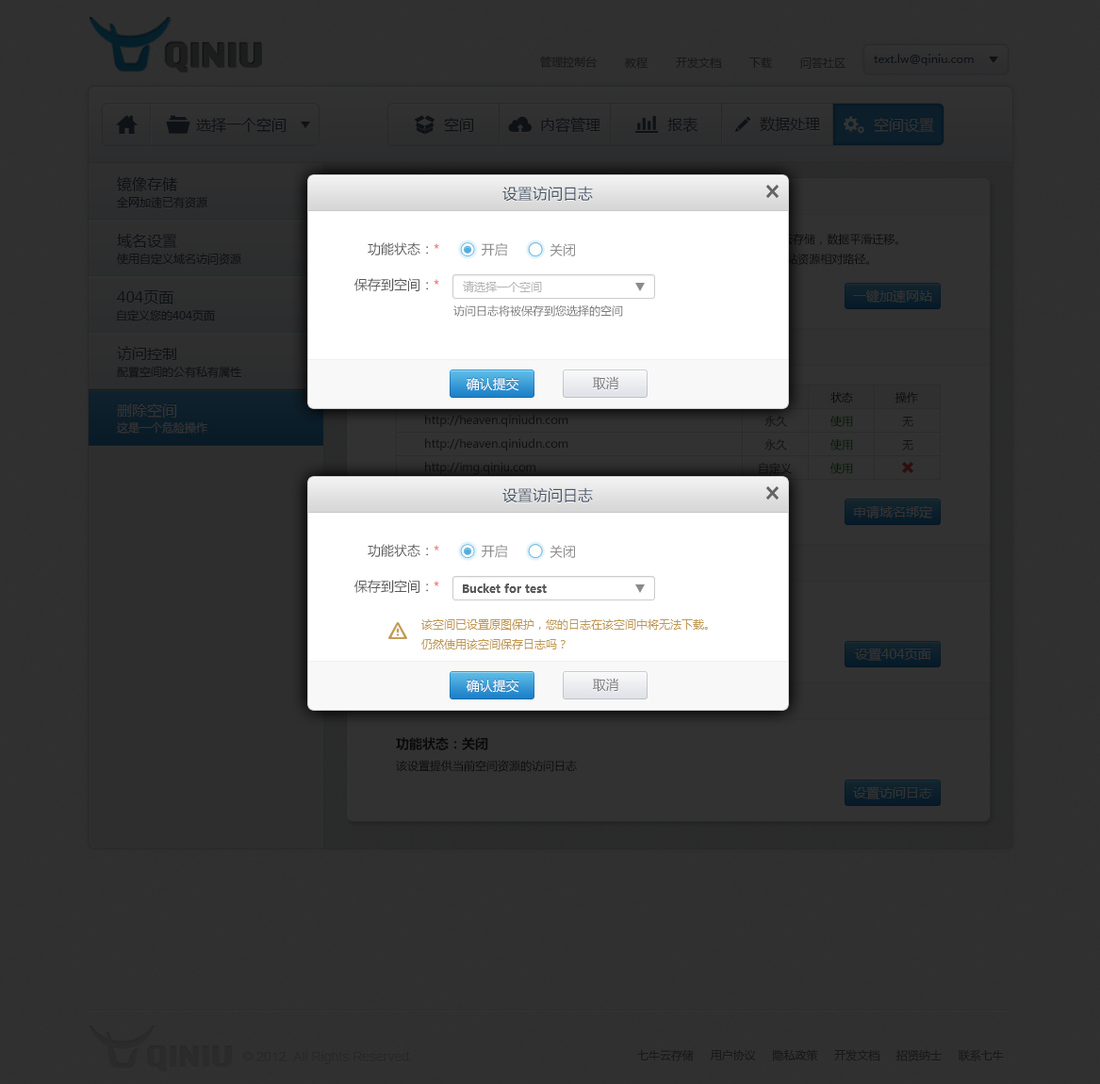
<style>
.page{position:relative;width:1100px;height:1084px;background:#303030}
.page>*{position:absolute;margin:0}
.t1{font:11.3px "MicrosoftYaHei";color:#0e1115}
.t2{font:11.3px "MicrosoftYaHei";color:#181818}
.t3{font:15.1px "MicrosoftYaHei";color:#0e1115}
.t4{font:15.1px "MicrosoftYaHei";color:#333333}
.t5{font:15.1px "MicrosoftYaHei";color:#465567}
.t6{font:13.2px "MicrosoftYaHei";color:#585858}
.t7{font:13.2px "MicrosoftYaHei";color:#e35959}
.t8{font:13.2px "MicrosoftYaHei";color:#8b8b8b}
.t9{font:13.2px "MicrosoftYaHei";color:#e65050}
.t10{font:11.3px "MicrosoftYaHei";color:#b4b4b4}
.t11{font:13.2px "MicrosoftYaHei";color:#333333}
.t12{font:11.3px "MicrosoftYaHei";color:#787878}
.t13{font:13.2px "MicrosoftYaHei";color:#ffffff}
.t14{font:13.2px "MicrosoftYaHei";color:#787878}
.t15{font:11.3px "MicrosoftYaHei";color:#0a0a0a}
.t16{font:11.3px "MicrosoftYaHei";color:#333333}
.t17{font:11.3px "MicrosoftYaHei";color:#111111}
.t18{font:11.3px "MicrosoftYaHei";color:#121212}
.t19{font:11.3px "MicrosoftYaHei";color:#001a00}
.t20{font:11.3px "MicrosoftYaHei";color:#0e0e0e}
.t21{font:11.3px "MicrosoftYaHei";color:#0d0d0d}
.t22{font:11.3px "MicrosoftYaHei-Bold";color:#585858}
.t23{font:11.3px "MicrosoftYaHei";color:#c09853}
.t24{font:13.2px "MicrosoftYaHei-Bold";color:#0a0a0a}
.t25{font:13.2px "ArialMT";color:#212121}
</style>
<div class="page">
<p class="t1" style="left:874px;top:54px;width:100px;height:12px">text.lw@qiniu.com</p>
<p class="t2" style="left:540px;top:56px;width:57px;height:12px">管理控制台</p>
<p class="t2" style="left:625px;top:57px;width:24px;height:12px">教程</p>
<p class="t2" style="left:676px;top:57px;width:45px;height:12px">开发文档</p>
<p class="t2" style="left:749px;top:57px;width:23px;height:12px">下载</p>
<p class="t2" style="left:800px;top:57px;width:46px;height:12px">问答社区</p>
<p class="t3" style="left:196px;top:117px;width:91px;height:16px">选择一个空间</p>
<p class="t3" style="left:444px;top:117px;width:30px;height:15px">空间</p>
<p class="t3" style="left:541px;top:117px;width:59px;height:16px">内容管理</p>
<p class="t3" style="left:667px;top:117px;width:31px;height:16px">报表</p>
<p class="t3" style="left:760px;top:116px;width:60px;height:16px">数据处理</p>
<p class="t4" style="left:874px;top:117px;width:60px;height:15px">空间设置</p>
<p class="t3" style="left:117px;top:176px;width:60px;height:16px">镜像存储</p>
<p class="t5" style="left:502px;top:186px;width:91px;height:16px">设置访问日志</p>
<p class="t1" style="left:117px;top:196px;width:90px;height:12px">全网加速已有资源</p>
<p class="t3" style="left:117px;top:234px;width:60px;height:14px">域名设置</p>
<p class="t6" style="left:368px;top:242px;width:71px;height:13px">功能状态：<span class="t7">*</span></p>
<p class="t8" style="left:482px;top:242px;width:25px;height:14px">开启</p>
<p class="t8" style="left:550px;top:243px;width:25px;height:13px">关闭</p>
<p class="t1" style="left:116px;top:253px;width:125px;height:12px">使用自定义域名访问资源</p>
<p class="t6" style="left:354px;top:278px;width:85px;height:13px">保存到空间：<span class="t9">*</span></p>
<p class="t10" style="left:463px;top:281px;width:79px;height:11px">请选择一个空间</p>
<p class="t3" style="left:117px;top:290px;width:56px;height:14px">404页面</p>
<p class="t11" style="left:853px;top:289px;width:79px;height:14px">一键加速网站</p>
<p class="t12" style="left:453px;top:304px;width:170px;height:13px">访问日志将被保存到您选择的空间</p>
<p class="t1" style="left:117px;top:309px;width:98px;height:12px">自定义您的404页面</p>
<p class="t3" style="left:117px;top:346px;width:59px;height:15px">访问控制</p>
<p class="t1" style="left:117px;top:367px;width:124px;height:11px">配置空间的公有私有属性</p>
<p class="t13" style="left:466px;top:377px;width:53px;height:14px">确认提交</p>
<p class="t14" style="left:593px;top:376px;width:25px;height:14px">取消</p>
<p class="t15" style="left:830px;top:392px;width:23px;height:11px">状态</p>
<p class="t15" style="left:895px;top:392px;width:23px;height:11px">操作</p>
<p class="t4" style="left:117px;top:402px;width:60px;height:16px">删除空间</p>
<p class="t16" style="left:117px;top:421px;width:90px;height:13px">这是一个危险操作</p>
<p class="t17" style="left:425px;top:415px;width:143px;height:12px">http://heaven.qiniudn.com</p>
<p class="t18" style="left:764px;top:416px;width:23px;height:11px">永久</p>
<p class="t19" style="left:830px;top:416px;width:23px;height:11px">使用</p>
<p class="t18" style="left:902px;top:417px;width:11px;height:10px">无</p>
<p class="t18" style="left:425px;top:438px;width:143px;height:13px">http://heaven.qiniudn.com</p>
<p class="t18" style="left:764px;top:439px;width:23px;height:12px">永久</p>
<p class="t19" style="left:830px;top:439px;width:23px;height:12px">使用</p>
<p class="t18" style="left:902px;top:440px;width:11px;height:11px">无</p>
<p class="t20" style="left:425px;top:462px;width:110px;height:12px">http://img.qiniu.com</p>
<p class="t21" style="left:759px;top:463px;width:33px;height:11px">自定义</p>
<p class="t19" style="left:830px;top:463px;width:23px;height:11px">使用</p>
<p class="t5" style="left:502px;top:487px;width:91px;height:16px">设置访问日志</p>
<p class="t11" style="left:854px;top:505px;width:78px;height:13px">申请域名绑定</p>
<p class="t6" style="left:368px;top:544px;width:71px;height:13px">功能状态：<span class="t7">*</span></p>
<p class="t8" style="left:482px;top:544px;width:25px;height:14px">开启</p>
<p class="t8" style="left:550px;top:545px;width:25px;height:13px">关闭</p>
<p class="t6" style="left:354px;top:580px;width:85px;height:13px">保存到空间：<span class="t9">*</span></p>
<p class="t22" style="left:463px;top:583px;width:84px;height:10px">Bucket for test</p>
<p class="t23" style="left:421px;top:619px;width:287px;height:30px">该空间已设置原图保护，您的日志在该空间中将无法下载。<br>仍然使用该空间保存日志吗？</p>
<p class="t11" style="left:855px;top:648px;width:76px;height:13px">设置404页面</p>
<p class="t14" style="left:593px;top:678px;width:25px;height:14px">取消</p>
<p class="t13" style="left:466px;top:679px;width:53px;height:14px">确认提交</p>
<p class="t15" style="left:396px;top:737px;width:181px;height:35px"><span class="t24">功能状态：关闭<br></span>该设置提供当前空间资源的访问日志</p>
<p class="t11" style="left:853px;top:786px;width:79px;height:13px">设置访问日志</p>
<p class="t2" style="left:637px;top:1049px;width:367px;height:12px">七牛云存储     用户协议     隐私政策     开发文档     招贤纳士     联系七牛</p>
<p class="t25" style="left:242px;top:1051px;width:170px;height:13px">© 2012. All Rights Reserved.</p>
</div>
